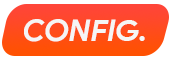
<style>
.page{position:relative;width:170px;height:60px}
.page>*{position:absolute;margin:0}
.t1{font:30px "ProductSans-BoldItalic";color:#f5f5f5}
</style>
<div class="page">
<p class="t1" style="left:24px;top:19px;width:121px;height:23px">CONFIG.</p>
</div>
